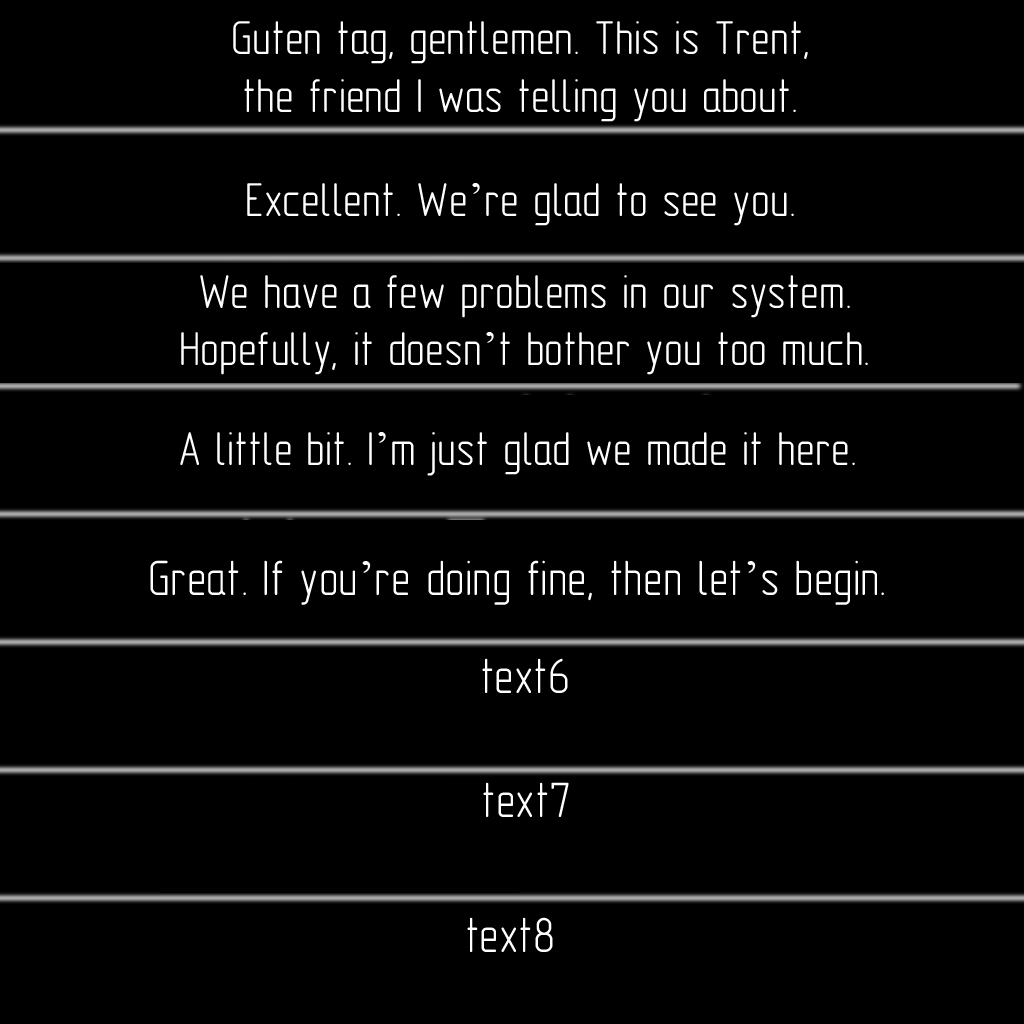
<style>
.page{position:relative;width:1024px;height:1024px;background:#000000}
.page>*{position:absolute;margin:0}
.t1{font:48px "GOST-2.304-81typeA";color:#ffffff}
.t2{font:48px "TimesNewRomanPSMT";color:#ffffff}
.t3{font:50px "GOST-2.304-81typeA";color:#ffffff}
.t4{font:50px "TimesNewRomanPSMT";color:#ffffff}
</style>
<div class="page">
<p class="t1" style="left:233px;top:21px;width:575px;height:101px;text-align:center">Guten tag, gentlemen. This is Trent,<br>the friend I was telling you about.</p>
<p class="t1" style="left:247px;top:183px;width:547px;height:43px">Excellent. We<span class="t2">’</span>re glad to see you.</p>
<p class="t1" style="left:181px;top:275px;width:687px;height:100px;text-align:center">We have a few problems in our system.<br>Hopefully, it doesn<span class="t2">’</span>t bother you too much.</p>
<p class="t1" style="left:180px;top:432px;width:675px;height:44px">A little bit. I<span class="t2">’</span>m just glad we made it here.</p>
<p class="t3" style="left:150px;top:560px;width:734px;height:45px">Great. If you<span class="t4">’</span>re doing fine, then let<span class="t4">’</span>s begin.</p>
<p class="t3" style="left:482px;top:658px;width:86px;height:35px">text6</p>
<p class="t3" style="left:483px;top:782px;width:86px;height:35px">text7</p>
<p class="t3" style="left:467px;top:917px;width:86px;height:35px">text8</p>
</div>
